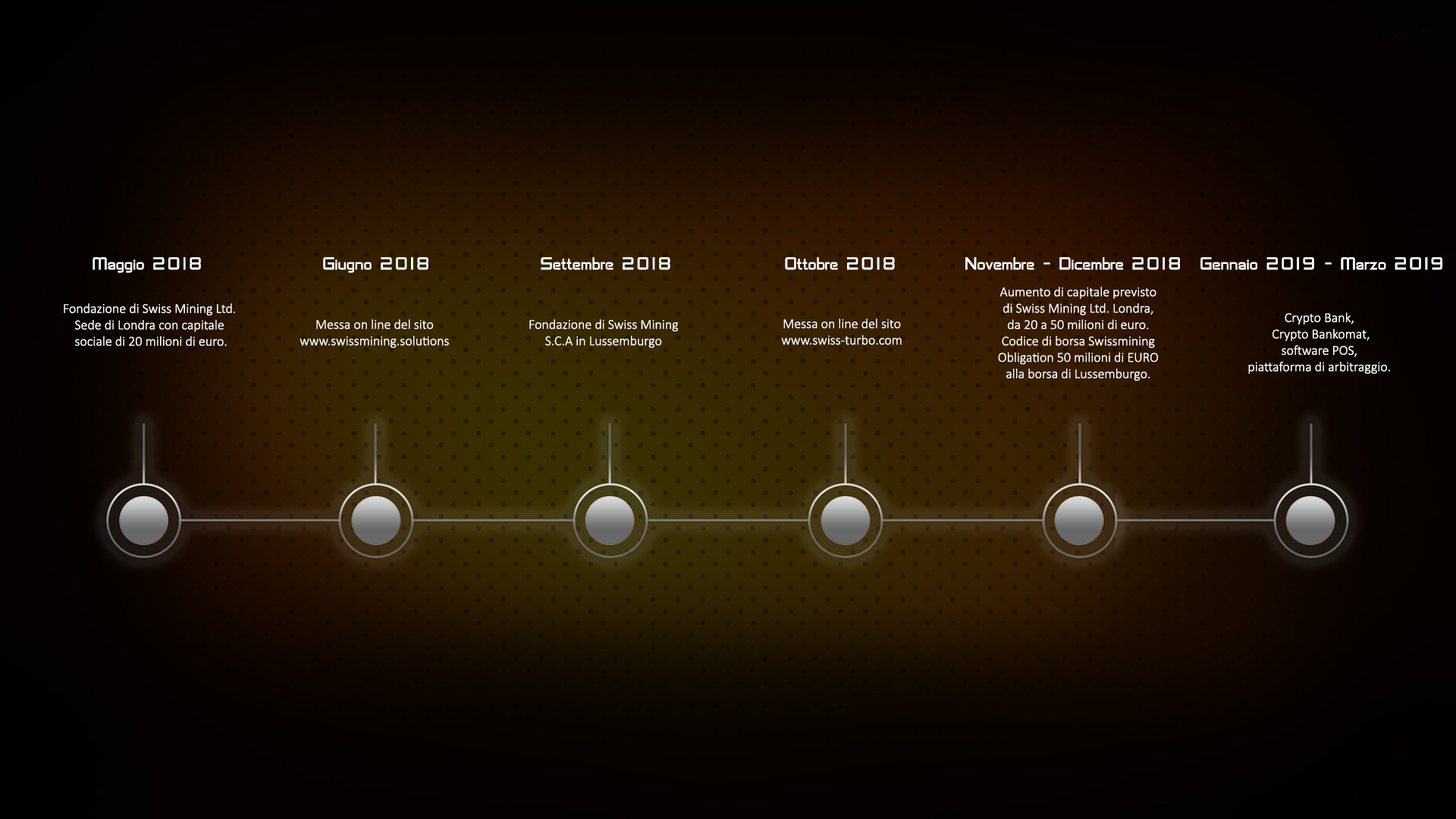
<style>
.page{position:relative;width:1456px;height:819px}
.page>*{position:absolute;margin:0}
.t1{font:18.2px "SFChaerilidae";color:#ffffff}
.t2{font:13.6px "Calibri-Light";color:#ffffff}
</style>
<div class="page">
<p class="t1" style="left:93px;top:257px;width:108px;height:16px">Maggio 2018</p>
<p class="t1" style="left:323px;top:257px;width:105px;height:16px">Giugno 2018</p>
<p class="t1" style="left:541px;top:257px;width:129px;height:13px">Settembre 2018</p>
<p class="t1" style="left:785px;top:257px;width:110px;height:13px">Ottobre 2018</p>
<p class="t1" style="left:965px;top:257px;width:215px;height:13px">Novembre - Dicembre 2018</p>
<p class="t1" style="left:1200px;top:257px;width:242px;height:13px">Gennaio 2019 - Marzo 2019</p>
<p class="t2" style="left:998px;top:287px;width:160px;height:94px;text-align:center">Aumento di capitale previsto di Swiss Mining Ltd. Londra, da 20 a 50 milioni di euro.<br>Codice di borsa Swissmining Obligation 50 milioni di EURO alla borsa di Lussemburgo.</p>
<p class="t2" style="left:64px;top:303px;width:171px;height:43px;text-align:center">Fondazione di Swiss Mining Ltd. Sede di Londra con capitale<br> sociale di 20 milioni di euro.</p>
<p class="t2" style="left:1248px;top:312px;width:142px;height:62px;text-align:center">Crypto Bank,<br> Crypto Bankomat, <br>software POS, <br>piattaforma di arbitraggio.</p>
<p class="t2" style="left:300px;top:319px;width:149px;height:29px;text-align:center">Messa on line del sito <br>www.swissmining.solutions</p>
<p class="t2" style="left:529px;top:319px;width:150px;height:29px;text-align:center">Fondazione di Swiss Mining S.C.A in Lussemburgo</p>
<p class="t2" style="left:781px;top:318px;width:121px;height:27px;text-align:center">Messa on line del sito www.swiss-turbo.com</p>
</div>
